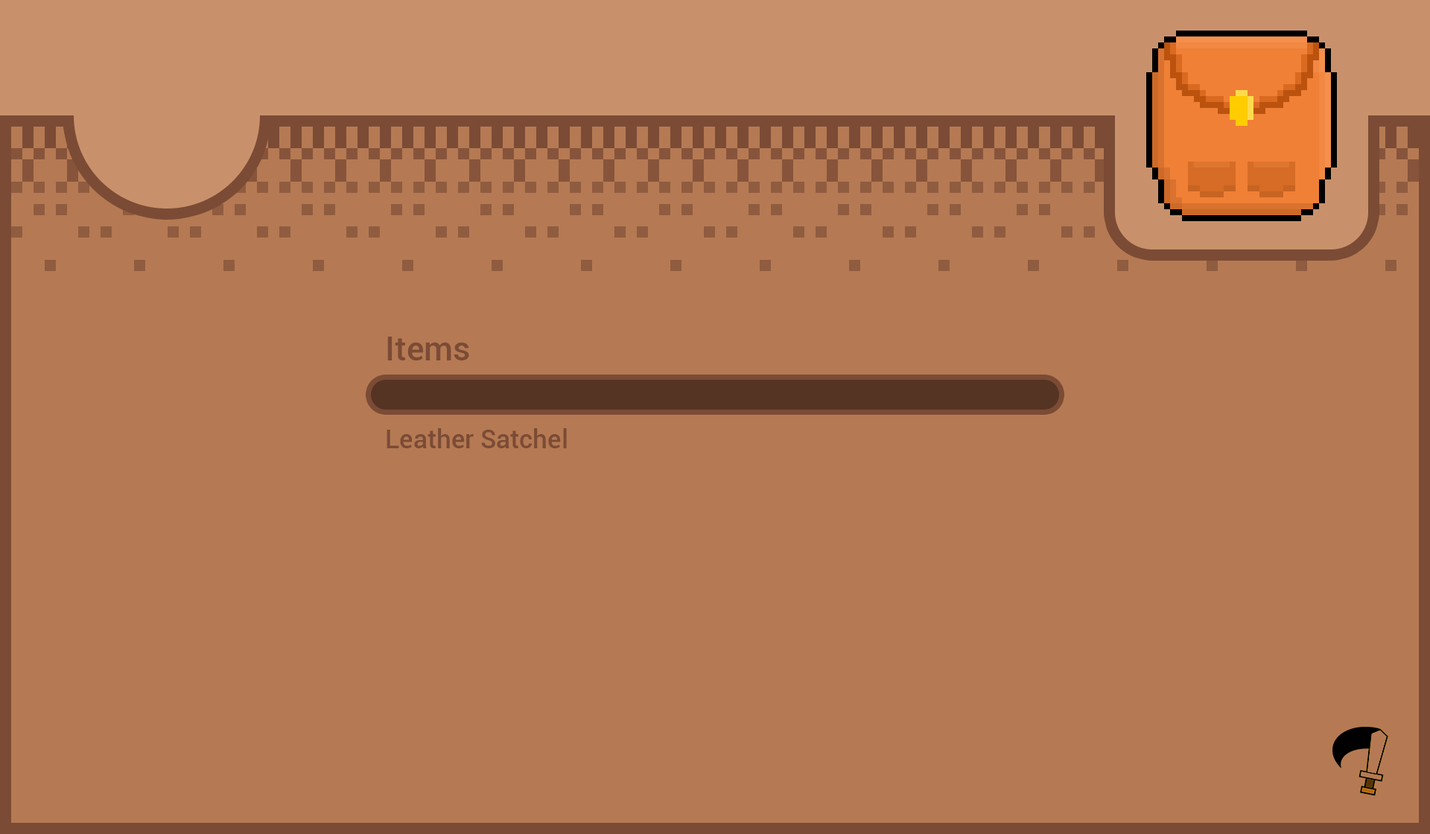
<style>
.page{position:relative;width:1430px;height:834px;background:#b57a53}
.page>*{position:absolute;margin:0}
.t1{font:33.5px "Roboto-Medium";color:#7b4b35}
.t2{font:26px "Roboto-Medium";color:#7b4b35}
</style>
<div class="page">
<p class="t1" style="left:387px;top:337px;width:82px;height:23px">Items</p>
<p class="t2" style="left:386px;top:428px;width:181px;height:20px">Leather Satchel</p>
</div>
